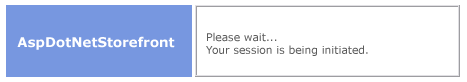
<style>
.page{position:relative;width:467px;height:82px;background:#ffffff}
.page>*{position:absolute;margin:0}
.t1{font:13.3px "Verdana-Bold";color:#ffffff}
.t2{font:10.7px "Verdana";color:#5c5c5c}
</style>
<div class="page">
<p class="t1" style="left:17px;top:36px;width:158px;height:14px">AspDotNetStorefront</p>
<p class="t2" style="left:206px;top:32px;width:162px;height:24px">Please wait...<br>Your session is being initiated.</p>
</div>
